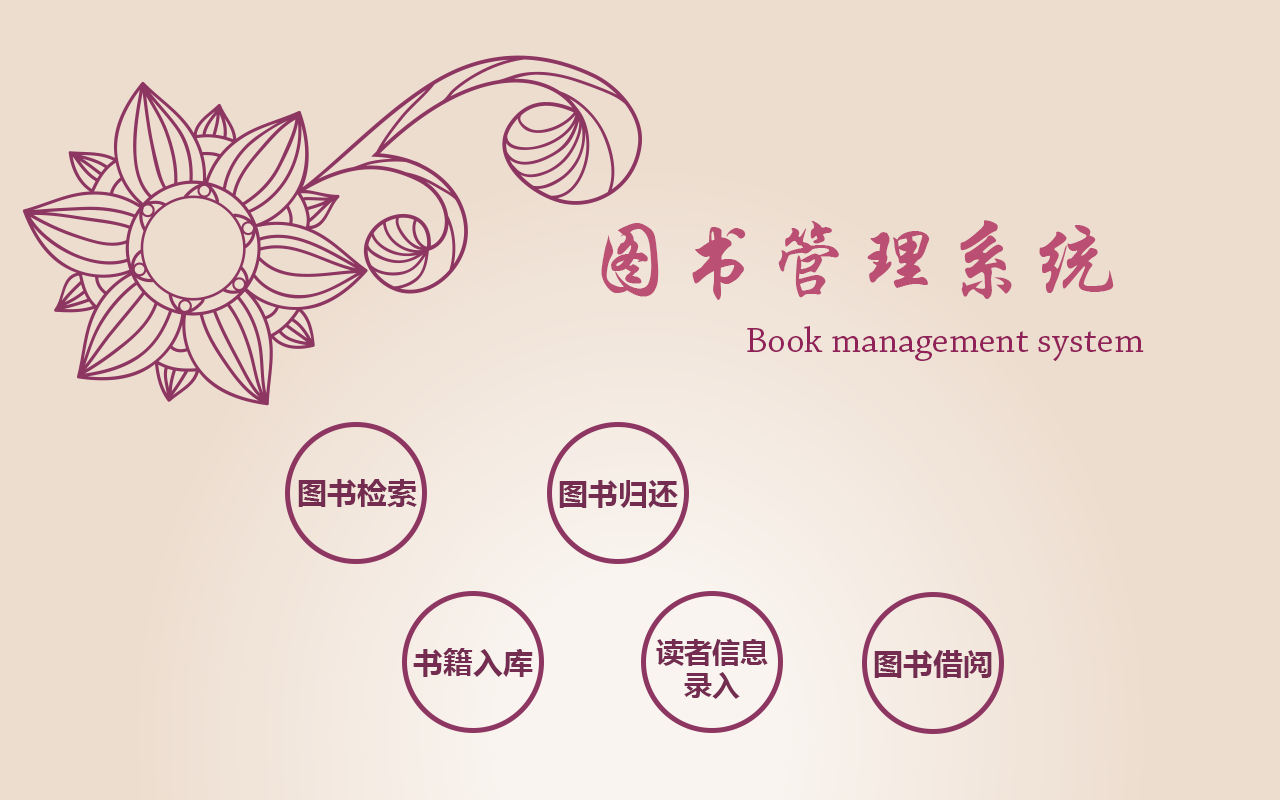
<style>
.page{position:relative;width:1280px;height:800px;background:#edddcf}
.page>*{position:absolute;margin:0}
.t1{font:89px "STXingkai";color:#ba4f73}
.t2{font:37px "ChaparralPro-Regular";color:#902259}
.t3{font:30px "MicrosoftYaHei-Bold";color:#742c50}
.t4{font:28px/33px "MicrosoftYaHei-Bold";color:#742c50}
</style>
<div class="page">
<p class="t1" style="left:601px;top:220px;width:513px;height:80px">图书管理系统</p>
<p class="t2" style="left:747px;top:326px;width:397px;height:35px">Book management system</p>
<p class="t3" style="left:298px;top:479px;width:119px;height:28px">图书检索</p>
<p class="t3" style="left:559px;top:480px;width:119px;height:28px">图书归还</p>
<p class="t4" style="left:656px;top:639px;width:112px;height:60px;text-align:center">读者信息<br>录入</p>
<p class="t3" style="left:413px;top:648px;width:120px;height:29px">书籍入库</p>
<p class="t3" style="left:874px;top:650px;width:118px;height:28px">图书借阅</p>
</div>
